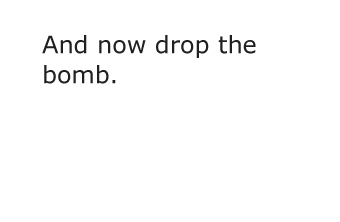
<style>
.page{position:relative;width:340px;height:222px;background:#ffffff}
.page>*{position:absolute;margin:0}
.t1{font:24px/30px "Verdana";color:#202020}
</style>
<div class="page">
<p class="t1" style="left:42px;top:35px;width:214px;height:49px">And now drop the bomb.</p>
</div>
